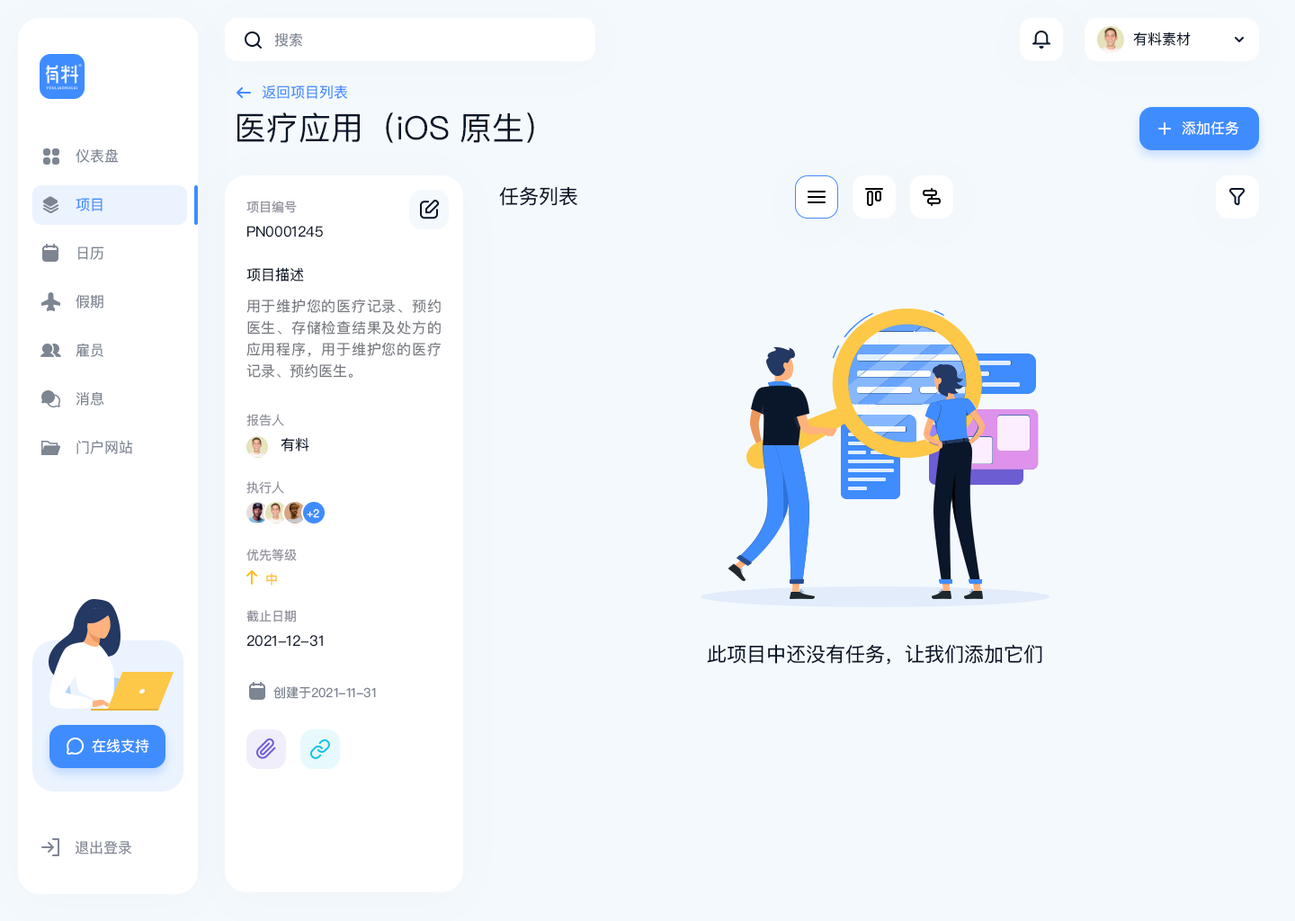
<style>
.page{position:relative;width:1295px;height:921px;background:#f4f9fd}
.page>*{position:absolute;margin:0}
.t1{font:14.4px "PingFangSC-Regular";color:#7d8592}
.t2{font:14.4px "PingFangSC-Regular";color:#0a1629}
.t3{font:14.4px "PingFangSC-Regular";color:#3f8cff}
.t4{font:32.4px "PingFangSC-Regular";color:#0a1629}
.t5{font:14.4px "PingFangSC-Regular";color:#ffffff}
.t6{font:19.8px "PingFangSC-Regular";color:#0a1629}
.t7{font:12.6px "PingFangSC-Regular";color:#91929e}
.t8{font:14.4px/21.6px "PingFangSC-Regular";color:#777a80}
.t9{font:10.8px "PingFangSC-Regular";color:#ffffff}
.t10{font:12.6px "PingFangSC-Regular";color:#ffbd21}
.t11{font:12.6px "PingFangSC-Regular";color:#7d8592}
</style>
<div class="page">
<p class="t1" style="left:274px;top:32px;width:28px;height:15px">搜索</p>
<p class="t2" style="left:1133px;top:31px;width:58px;height:15px">有料素材</p>
<p class="t3" style="left:262px;top:85px;width:86px;height:14px">返回项目列表</p>
<p class="t4" style="left:237px;top:112px;width:297px;height:31px">医疗应用（iOS 原生）</p>
<p class="t5" style="left:1182px;top:121px;width:57px;height:14px">添加任务</p>
<p class="t1" style="left:76px;top:148px;width:43px;height:15px">仪表盘</p>
<p class="t3" style="left:76px;top:198px;width:27px;height:13px">项目</p>
<p class="t6" style="left:499px;top:186px;width:78px;height:20px">任务列表</p>
<p class="t7" style="left:246px;top:201px;width:51px;height:12px">项目编号</p>
<p class="t2" style="left:247px;top:226px;width:76px;height:11px">PN0001245</p>
<p class="t1" style="left:78px;top:246px;width:25px;height:14px">日历</p>
<p class="t2" style="left:246px;top:267px;width:58px;height:14px">项目描述</p>
<p class="t1" style="left:76px;top:294px;width:27px;height:14px">假期</p>
<p class="t8" style="left:246px;top:299px;width:195px;height:79px;text-align:justify">用于维护您的医疗记录、预约医生、存储检查结果及处方的应用程序，用于维护您的医疗记录、预约医生。</p>
<p class="t1" style="left:76px;top:343px;width:27px;height:14px">雇员</p>
<p class="t1" style="left:76px;top:391px;width:28px;height:15px">消息</p>
<p class="t7" style="left:246px;top:414px;width:38px;height:12px">报告人</p>
<p class="t2" style="left:281px;top:437px;width:28px;height:14px">有料</p>
<p class="t1" style="left:76px;top:440px;width:57px;height:14px">门户网站</p>
<p class="t7" style="left:246px;top:481px;width:38px;height:13px">执行人</p>
<p class="t9" style="left:307px;top:509px;width:12px;height:9px">+2</p>
<p class="t7" style="left:246px;top:549px;width:51px;height:12px">优先等级</p>
<p class="t10" style="left:266px;top:573px;width:11px;height:12px">中</p>
<p class="t7" style="left:246px;top:610px;width:50px;height:12px">截止日期</p>
<p class="t2" style="left:246px;top:635px;width:77px;height:12px">2021-12-31</p>
<p class="t6" style="left:707px;top:644px;width:335px;height:21px">此项目中还没有任务，让我们添加它们</p>
<p class="t11" style="left:273px;top:686px;width:103px;height:13px">创建于2021-11-31</p>
<p class="t5" style="left:92px;top:738px;width:57px;height:15px">在线支持</p>
<p class="t1" style="left:75px;top:840px;width:56px;height:14px">退出登录</p>
</div>
